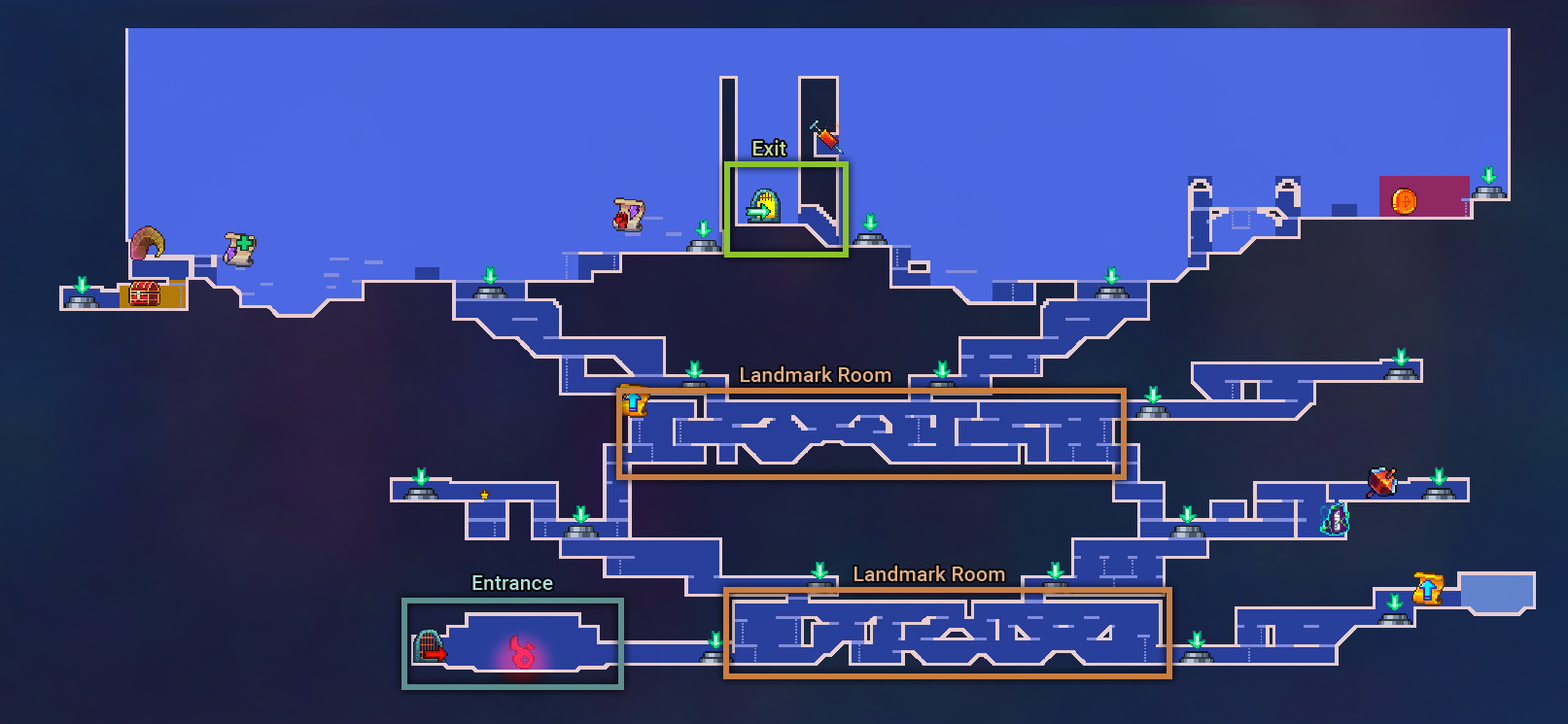
<style>
.page{position:relative;width:1568px;height:724px}
.page>*{position:absolute;margin:0}
.t1{font:20.7px "Roboto-Medium";color:#c4db9e}
.t2{font:20.7px "Roboto-Medium";color:#e4af84}
.t3{font:20.7px "Roboto-Medium";color:#acdddd}
</style>
<div class="page">
<p class="t1" style="left:753px;top:140px;width:33px;height:16px">Exit</p>
<p class="t2" style="left:741px;top:366px;width:150px;height:16px">Landmark Room</p>
<p class="t2" style="left:854px;top:566px;width:151px;height:15px">Landmark Room</p>
<p class="t3" style="left:472px;top:575px;width:81px;height:15px">Entrance</p>
</div>
